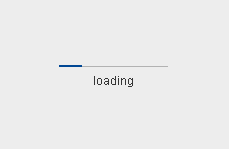
<style>
.page{position:relative;width:229px;height:149px;background:#ededed}
.page>*{position:absolute;margin:0}
.t1{font:12px "ArialMT";color:#363636}
</style>
<div class="page">
<p class="t1" style="left:94px;top:76px;width:39px;height:11px">loading</p>
</div>
